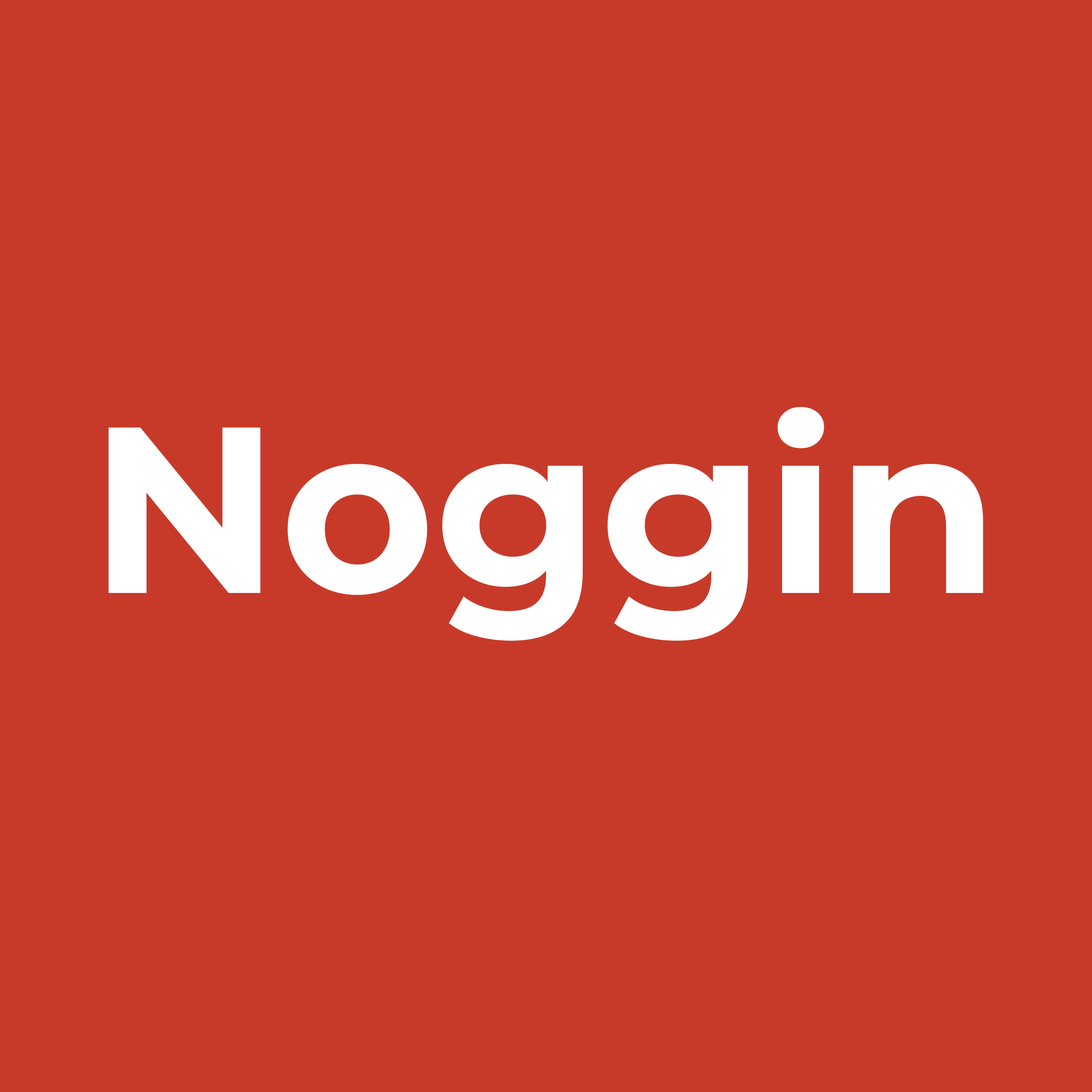
<style>
.page{position:relative;width:1092px;height:1092px;background:#c73a29}
.page>*{position:absolute;margin:0}
.t1{font:236.2px "Montserrat-Bold";color:#ffffff}
</style>
<div class="page">
<p class="t1" style="left:108px;top:407px;width:875px;height:234px">Noggin</p>
</div>
